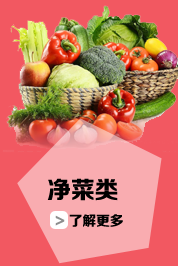
<style>
.page{position:relative;width:178px;height:266px;background:#f25861}
.page>*{position:absolute;margin:0}
.t1{font:14px/36px "FZZDHJW--GB1-0";color:#000000}
.t2{font:24px/36px "FZZDHJW--GB1-0";color:#000000}
.t3{font:14px/36px "FZZDHJW--GB1-0";color:#8e8e8e}
</style>
<div class="page">
<p class="t1" style="left:47px;top:178px;width:76px;height:49px"><span class="t2">净菜类<br>  </span><span class="t3">&gt;</span> 了解更多</p>
</div>
